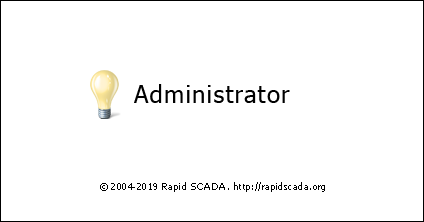
<style>
.page{position:relative;width:424px;height:222px;background:#ffffff}
.page>*{position:absolute;margin:0}
.t1{font:24px "Tahoma";letter-spacing:0.05em;color:#000000}
.t2{font:9px "Tahoma";letter-spacing:0.05em;color:#000000}
</style>
<div class="page">
<p class="t1" style="left:134px;top:84px;width:156px;height:19px">Administrator</p>
<p class="t2" style="left:100px;top:182px;width:225px;height:10px">© 2004-2019 Rapid SCADA. http://rapidscada.org</p>
</div>
